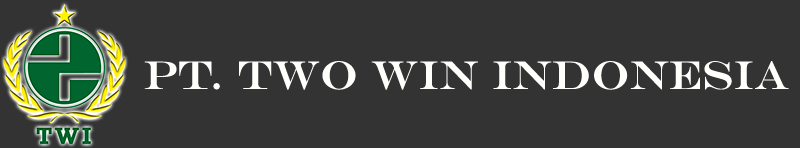
<style>
.page{position:relative;width:800px;height:148px;background:#333333}
.page>*{position:absolute;margin:0}
.t1{font:40px "EngraversMT";color:#fffffb}
</style>
<div class="page">
<p class="t1" style="left:144px;top:61px;width:645px;height:29px">PT. TWO WIN INDONESIA</p>
</div>
